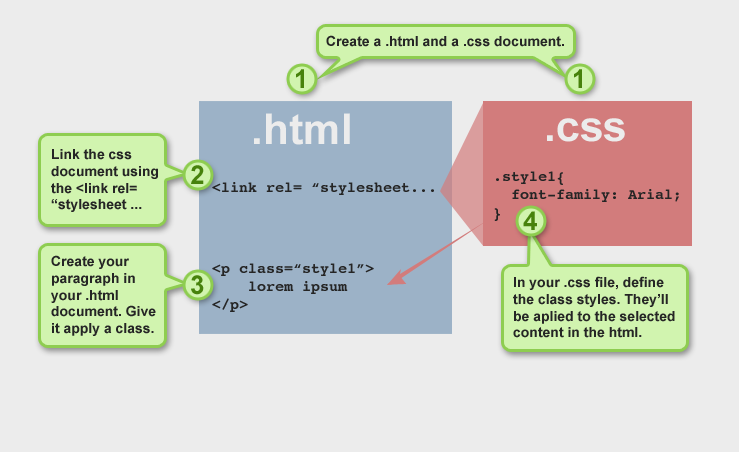
<style>
.page{position:relative;width:739px;height:452px;background:#ececec}
.page>*{position:absolute;margin:0}
.t1{font:14px "Arial-BoldMT";color:#252525}
.t2{font:25.9px "Arial-BoldMT";color:#47820c}
.t3{font:42.5px "Arial-BoldMT";color:#ececec}
.t4{font:15px "Courier-Bold";color:#252525}
</style>
<div class="page">
<p class="t1" style="left:326px;top:35px;width:238px;height:12px">Create a .html and a .css document.</p>
<p class="t2" style="left:296px;top:69px;width:8px;height:19px">1</p>
<p class="t2" style="left:574px;top:69px;width:8px;height:19px">1</p>
<p class="t3" style="left:254px;top:113px;width:96px;height:32px">.html</p>
<p class="t3" style="left:547px;top:118px;width:78px;height:24px">.css</p>
<p class="t1" style="left:51px;top:149px;width:107px;height:63px">Link the css document using the &lt;link rel= “stylesheet ...</p>
<p class="t2" style="left:191px;top:165px;width:13px;height:19px">2</p>
<p class="t4" style="left:494px;top:171px;width:185px;height:50px">.style1{<br>  font-family: Arial;<br>}</p>
<p class="t4" style="left:212px;top:182px;width:222px;height:13px">&lt;link rel= “stylesheet...</p>
<p class="t2" style="left:523px;top:211px;width:14px;height:19px">4</p>
<p class="t1" style="left:51px;top:255px;width:105px;height:81px">Create your paragraph in your .html document. Give it apply a class.</p>
<p class="t4" style="left:212px;top:263px;width:162px;height:49px">&lt;p class=“style1”&gt;<br>    lorem ipsum<br>&lt;/p&gt;</p>
<p class="t2" style="left:191px;top:275px;width:13px;height:20px">3</p>
<p class="t1" style="left:513px;top:276px;width:162px;height:62px">In your .css file, define the class styles. They’ll be aplied to the selected content in the html.</p>
</div>
